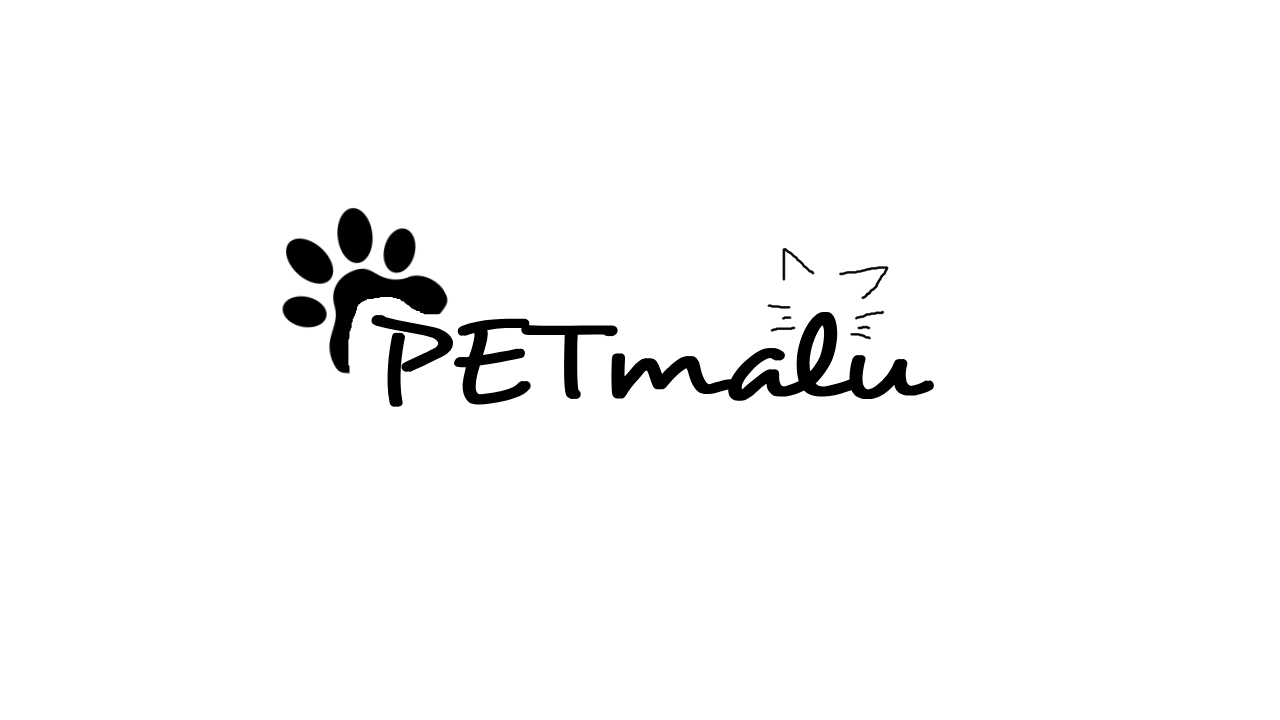
<style>
.page{position:relative;width:1280px;height:720px;background:#ffffff}
.page>*{position:absolute;margin:0}
.t1{font:127px "Desyrel";color:#000000;font-weight:bold}
</style>
<div class="page">
<p class="t1" style="left:371px;top:311px;width:564px;height:97px">PETmalu</p>
</div>
